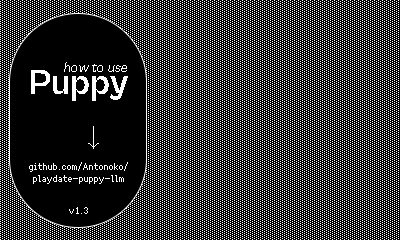
<style>
.page{position:relative;width:400px;height:240px;background:#000000}
.page>*{position:absolute;margin:0}
.t1{font:14px "CabinetGrotesk-Regular";color:#ffffff;font-style:italic}
.t2{font:36px "CabinetGrotesk-Bold";color:#ffffff}
.t3{font:10px/12px "Fusion-Pixel-10px-Proportional-zh_hans-Regular";color:#ffffff}
.t4{font:10px "Fusion-Pixel-10px-Proportional-zh_hans-Regular";color:#ffffff}
</style>
<div class="page">
<p class="t1" style="left:64px;top:62px;width:63px;height:10px">how to use</p>
<p class="t2" style="left:31px;top:70px;width:97px;height:31px">Puppy</p>
<p class="t3" style="left:29px;top:162px;width:99px;height:22px;text-align:center">github.com/Antonoko/<br>playdate-puppy-llm</p>
<p class="t4" style="left:69px;top:207px;width:19px;height:7px">v1.3</p>
</div>
